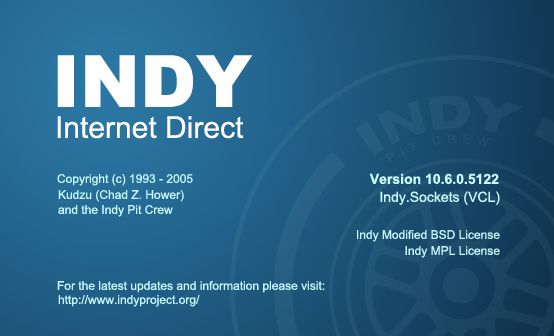
<style>
.page{position:relative;width:554px;height:336px}
.page>*{position:absolute;margin:0}
.t1{font:72px "Arial-Black";color:#ffffff}
.t2{font:46px "Arial-Black";color:#225575}
.t3{font:30px "ArialMT";color:#ffffff}
.t4{font:11.5px "ArialMT";letter-spacing:0.5em;color:#215272}
.t5{font:12px "ArialMT";color:#cafbff}
.t6{font:14px "Arial-BoldMT";color:#cafbff}
.t7{font:14px "ArialMT";color:#cafbff}
</style>
<div class="page">
<p class="t1" style="left:57px;top:55px;width:196px;height:52px">INDY</p>
<p class="t2" style="left:355px;top:95px;width:168px;height:61px;rotate:-8deg">INDY</p>
<p class="t3" style="left:57px;top:116px;width:187px;height:23px">Internet Direct</p>
<p class="t4" style="left:386px;top:134px;width:104px;height:29px;rotate:-8deg">PIT CREW</p>
<p class="t5" style="left:57px;top:174px;width:136px;height:12px">Copyright (c) 1993 - 2005</p>
<p class="t6" style="left:369px;top:173px;width:130px;height:12px">Version 10.6.0.5122</p>
<p class="t5" style="left:58px;top:190px;width:126px;height:12px">Kudzu (Chad Z. Hower)</p>
<p class="t7" style="left:380px;top:191px;width:120px;height:14px">Indy.Sockets (VCL)</p>
<p class="t5" style="left:58px;top:205px;width:115px;height:12px">and the Indy Pit Crew</p>
<p class="t5" style="left:357px;top:230px;width:143px;height:12px">Indy Modified BSD License</p>
<p class="t5" style="left:405px;top:246px;width:95px;height:12px">Indy MPL License</p>
<p class="t5" style="left:57px;top:281px;width:268px;height:12px">For the latest updates and information please visit:</p>
<p class="t5" style="left:58px;top:295px;width:142px;height:12px">http://www.indyproject.org/</p>
</div>
